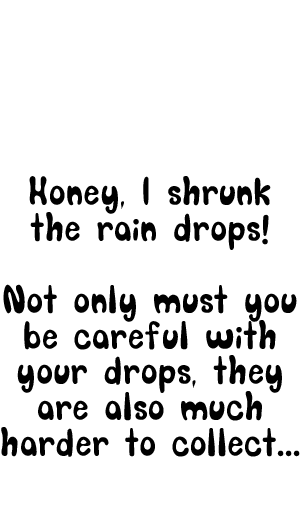
<style>
.page{position:relative;width:300px;height:519px;background:#ffffff}
.page>*{position:absolute;margin:0}
.t1{font:29.9px "SORRY_SORRY";letter-spacing:0.03em;color:#000000}
</style>
<div class="page">
<p class="t1" style="left:1px;top:176px;width:299px;height:281px;text-align:center">Honey, I shrunk the rain drops! <br><br>Not only must you be careful with your drops, they are also much harder to collect...</p>
</div>
